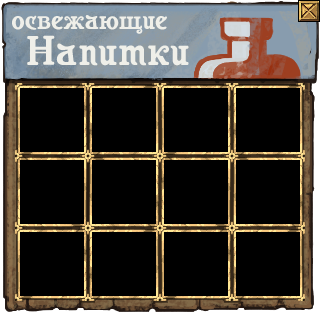
<style>
.page{position:relative;width:320px;height:320px;background:#000000}
.page>*{position:absolute;margin:0}
.t1{font:27.1px "Casanova";letter-spacing:0.01em;color:#efefe9}
.t2{font:41.4px "Casanova";letter-spacing:0.02em;color:#efefe9}
</style>
<div class="page">
<p class="t1" style="left:12px;top:15px;width:155px;height:19px">освежающие</p>
<p class="t2" style="left:27px;top:35px;width:162px;height:31px">Напитки</p>
</div>
